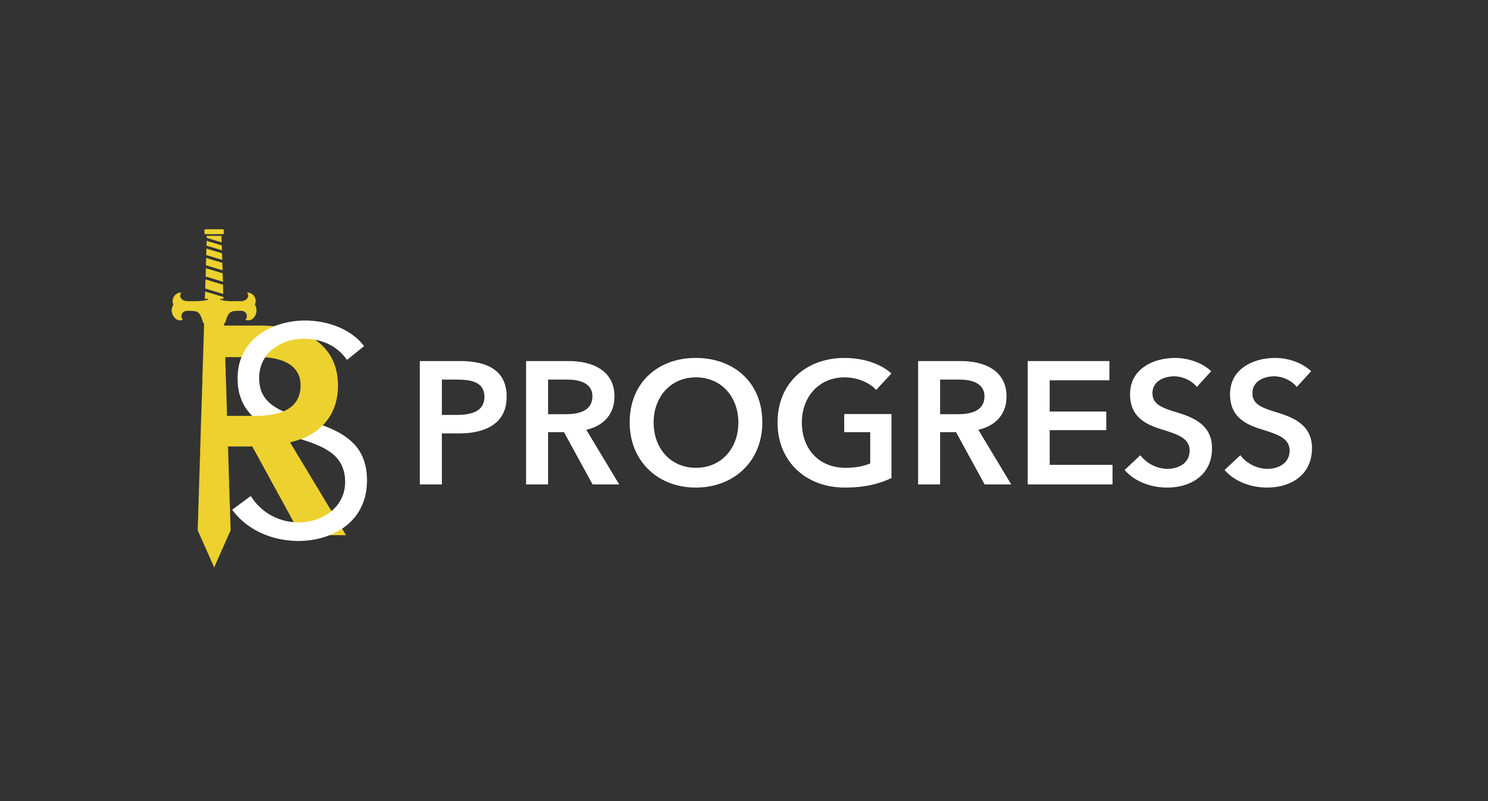
<style>
.page{position:relative;width:1488px;height:801px;background:#333333}
.page>*{position:absolute;margin:0}
.t1{font:296px "AvenirNextLTPro-Regular";color:#ffffff}
.t2{font:174.2px "AvenirNextLTPro-Demi";color:#ffffff}
</style>
<div class="page">
<p class="t1" style="left:232px;top:321px;width:135px;height:220px">S</p>
<p class="t2" style="left:420px;top:358px;width:892px;height:130px">PROGRESS</p>
</div>
